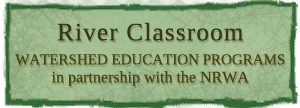
<style>
.page{position:relative;width:300px;height:108px}
.page>*{position:absolute;margin:0}
.t1{font:15px/24px "Tinos";color:#4b4512}
.t2{font:25px "Tinos";letter-spacing:0.05em;color:#383415}
.t3{font:16px/18px "Tinos";color:#4b4512}
</style>
<div class="page">
<p class="t1" style="left:15px;top:22px;width:270px;height:64px;text-align:center"><span class="t2">River Classroom<br></span>WATERSHED EDUCATION PROGRAMS<br><span class="t3">in partnership with the NRWA</span></p>
</div>
